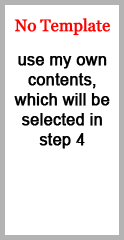
<style>
.page{position:relative;width:124px;height:240px;background:#ffffff}
.page>*{position:absolute;margin:0}
.t1{font:16.7px "Vani";letter-spacing:-0.01em;color:#fd0000;font-weight:bold;scale:0.97 1}
.t2{font:16.7px "ArialMT";letter-spacing:-0.01em;color:#010101;font-weight:bold;scale:0.97 1}
</style>
<div class="page">
<p class="t1" style="left:14px;top:18px;width:96px;height:18px">No Template</p>
<p class="t2" style="left:14px;top:56px;width:96px;height:93px;text-align:center">use my own contents, which will be selected in step 4</p>
</div>
